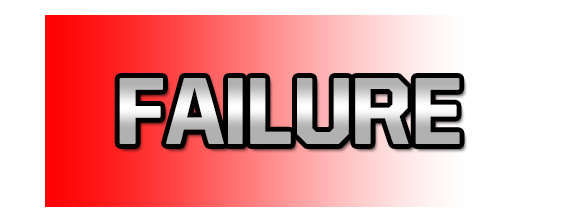
<style>
.page{position:relative;width:578px;height:224px;background:#ffffff}
.page>*{position:absolute;margin:0}
.t1{font:100px "Allstar4";letter-spacing:-0.005em}
</style>
<div class="page">
<p class="t1" style="left:119px;top:78px;width:341px;height:66px">failure</p>
</div>
